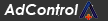
<style>
.page{position:relative;width:108px;height:21px;background:#333333}
.page>*{position:absolute;margin:0}
.t1{font:15px "CenturyGothic-BoldItalic";color:#ffffff}
</style>
<div class="page">
<p class="t1" style="left:4px;top:4px;width:75px;height:11px">AdControl</p>
</div>
